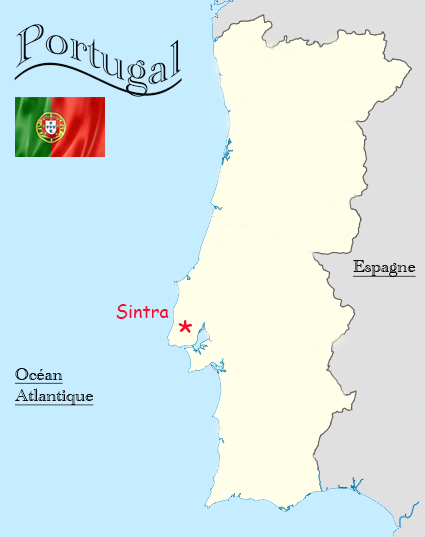
<style>
.page{position:relative;width:425px;height:537px;background:#c6ecff}
.page>*{position:absolute;margin:0}
.t1{font:48px "AcademyEngravedLetPlain";color:#0a0908;text-decoration:underline}
.t2{font:18px "AcademyEngravedLetPlain";color:#0a0908;text-decoration:underline}
.t3{font:18px "ComicSansMS";color:#f20c2d}
.t4{font:30px "ComicSansMS";color:#f20c2d}
</style>
<div class="page">
<p class="t1" style="left:14px;top:24px;width:168px;height:73px">Portugal</p>
<p class="t2" style="left:352px;top:260px;width:64px;height:17px">Espagne</p>
<p class="t3" style="left:116px;top:304px;width:53px;height:15px">Sintra</p>
<p class="t4" style="left:178px;top:320px;width:15px;height:13px">*</p>
<p class="t2" style="left:14px;top:368px;width:80px;height:38px">Océan<br>Atlantique</p>
</div>
